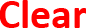
<style>
.page{position:relative;width:86px;height:28px;background:#ffffff}
.page>*{position:absolute;margin:0}
.t1{font:41.7px "Calibri-Bold";color:#ff0000}
</style>
<div class="page">
<p class="t1" style="left:0px;top:0px;width:87px;height:28px">Clear</p>
</div>
